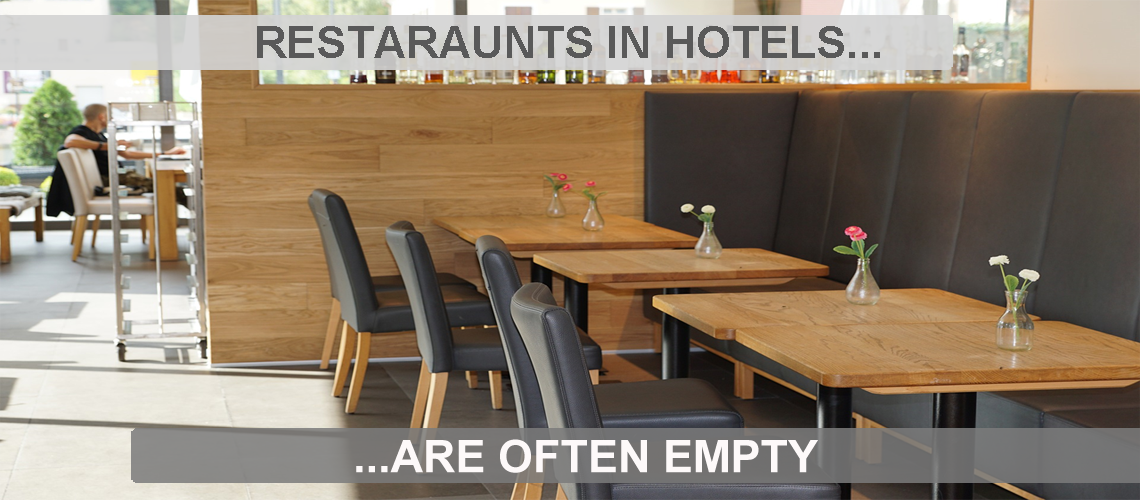
<style>
.page{position:relative;width:1140px;height:500px}
.page>*{position:absolute;margin:0}
.t1{font:45px "Arial-BoldMT";color:#595959}
.t2{font:45px "ArialMT";color:#0a0101}
.t3{font:45px "Arial-BoldMT";color:#fdf9f9}
</style>
<div class="page">
<p class="t1" style="left:257px;top:26px;width:623px;height:32px"><span class="t2">             </span>RESTARAUNTS IN HOTELS...</p>
<p class="t3" style="left:356px;top:439px;width:462px;height:34px">...ARE OFTEN EMPTY</p>
</div>
